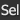
<style>
.page{position:relative;width:20px;height:20px;background:#333333}
.page>*{position:absolute;margin:0}
.t1{font:14px "Tahoma";color:#e6e6e6}
</style>
<div class="page">
<p class="t1" style="left:1px;top:4px;width:18px;height:12px">Sel</p>
</div>
